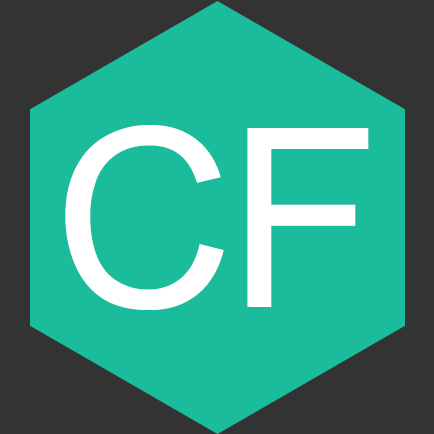
<style>
.page{position:relative;width:434px;height:434px;background:#1abc9c}
.page>*{position:absolute;margin:0}
.t1{font:250px "ArialMT";letter-spacing:-0.025em;color:#ffffff}
</style>
<div class="page">
<p class="t1" style="left:65px;top:125px;width:304px;height:185px">CF</p>
</div>
